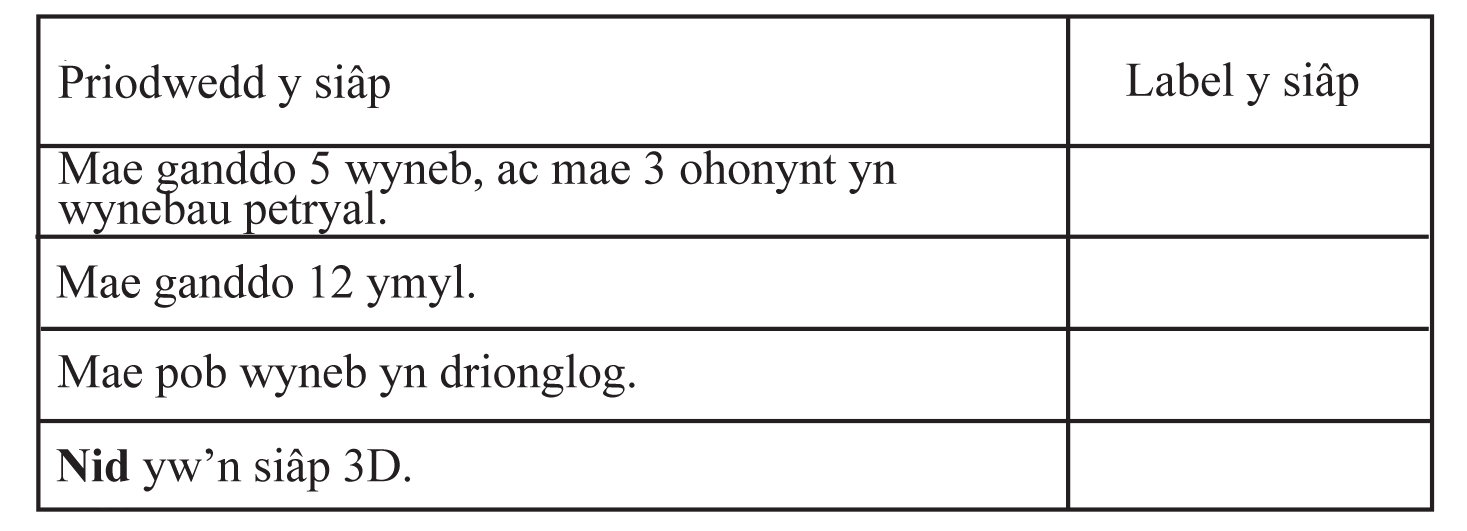
<style>
.page{position:relative;width:1467px;height:531px;background:#ffffff}
.page>*{position:absolute;margin:0}
.t1{font:48px "TimesNewRomanPSMT";color:#231f20}
.t2{font:48px/40px "TimesNewRomanPSMT";color:#231f20}
.t3{font:48px "TimesNewRomanPS-BoldMT";color:#231f20}
</style>
<div class="page">
<p class="t1" style="left:58px;top:64px;width:332px;height:44px">Priodwedd y siâp</p>
<p class="t1" style="left:1126px;top:62px;width:233px;height:44px">Label y siâp</p>
<p class="t2" style="left:58px;top:150px;width:839px;height:84px">Mae ganddo 5 wyneb, ac mae 3 ohonynt yn <br>wynebau petryal.</p>
<p class="t1" style="left:56px;top:264px;width:418px;height:44px">Mae ganddo 12 ymyl.</p>
<p class="t1" style="left:58px;top:353px;width:577px;height:45px">Mae pob wyneb yn drionglog.</p>
<p class="t1" style="left:56px;top:447px;width:354px;height:45px"><span class="t3">Nid</span> yw’n siâp 3D.</p>
</div>
